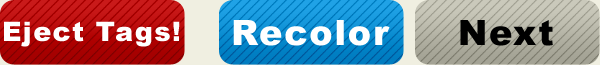
<style>
.page{position:relative;width:600px;height:65px}
.page>*{position:absolute;margin:0}
.t1{font:27px "Arial-Black";letter-spacing:0.05em;color:#ffffff}
.t2{font:35px "Arial-Black";letter-spacing:0.05em;color:#ffffff}
.t3{font:35px "Arial-Black";letter-spacing:0.05em;color:#000000}
</style>
<div class="page">
<p class="t1" style="left:4px;top:21px;width:176px;height:26px">Eject Tags!</p>
<p class="t2" style="left:233px;top:20px;width:157px;height:26px">Recolor</p>
<p class="t3" style="left:460px;top:20px;width:93px;height:26px">Next</p>
</div>
